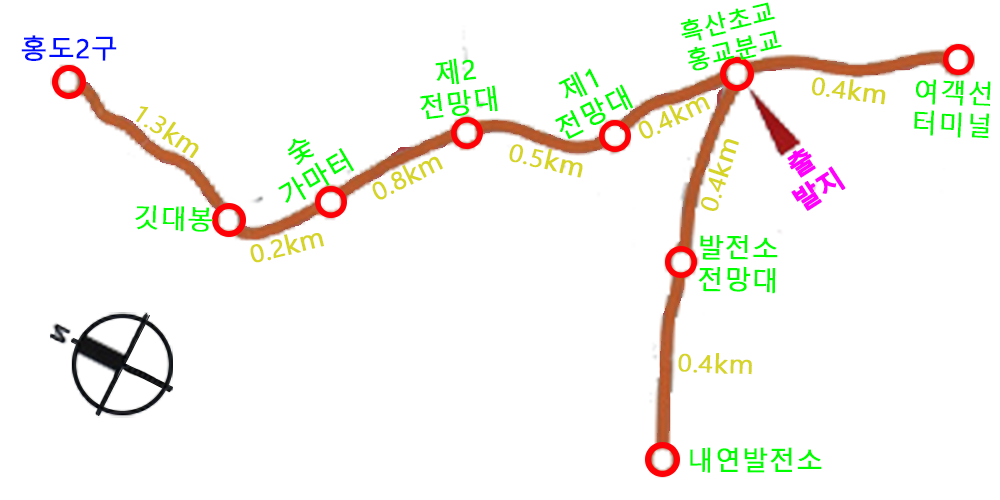
<style>
.page{position:relative;width:1000px;height:500px;background:#ffffff}
.page>*{position:absolute;margin:0}
.t1{font:24.1px "MalgunGothic";color:#00fe00;font-weight:bold}
.t2{font:26.3px "MalgunGothic";color:#000cfe;font-weight:bold}
.t3{font:26.6px/32px "MalgunGothic";color:#00fe00;font-weight:bold}
.t4{font:26.4px/32px "MalgunGothic";color:#00fe00;font-weight:bold}
.t5{font:24.2px "MalgunGothic";color:#d6d426;font-weight:bold;scale:1.06 1}
.t6{font:26.8px "MalgunGothic";color:#d6d426;font-weight:bold;scale:1.06 1}
.t7{font:24px "MalgunGothic";color:#d6d426;font-weight:bold;scale:1.07 1}
.t8{font:26.6px "MalgunGothic";color:#d6d426;font-weight:bold;scale:1.07 1}
.t9{font:24.1px "MalgunGothic";color:#d6d426;font-weight:bold;scale:1.06 1}
.t10{font:26.7px "MalgunGothic";color:#d6d426;font-weight:bold;scale:1.06 1}
.t11{font:23.9px "MalgunGothic";color:#d6d426;font-weight:bold;scale:1.07 1}
.t12{font:26.5px "MalgunGothic";color:#d6d426;font-weight:bold;scale:1.07 1}
.t13{font:23.8px "MalgunGothic";color:#d6d426;font-weight:bold;scale:1.06 1}
.t14{font:26.4px "MalgunGothic";color:#d6d426;font-weight:bold;scale:1.06 1}
.t15{font:26.3px "MalgunGothic";color:#00fe00;font-weight:bold}
.t16{font:24px "MalgunGothic";color:#d6d426;font-weight:bold;scale:1.06 1}
.t17{font:26.6px "MalgunGothic";color:#d6d426;font-weight:bold;scale:1.06 1}
.t18{font:26.2px/32px "MalgunGothic";color:#00fe00;font-weight:bold}
.t19{font:26.5px "MalgunGothic";color:#00fe00;font-weight:bold}
</style>
<div class="page">
<p class="t1" style="left:681px;top:2px;width:101px;height:69px;rotate:-13deg">흑산초교 <br>홍교분교</p>
<p class="t2" style="left:21px;top:35px;width:96px;height:26px">홍도2구</p>
<p class="t3" style="left:420px;top:58px;width:78px;height:62px;text-align:center;rotate:-7deg">제2<br>전망대</p>
<p class="t4" style="left:555px;top:68px;width:78px;height:71px;text-align:center;rotate:-26deg">제1<br>전망대</p>
<p class="t5" style="left:812px;top:77px;width:74px;height:28px;rotate:8deg">0.4<span class="t6">km</span></p>
<p class="t3" style="left:914px;top:79px;width:77px;height:60px;rotate:3deg">여객선<br>터미널</p>
<p class="t7" style="left:638px;top:97px;width:72px;height:42px;rotate:-26deg">0.4<span class="t8">km</span></p>
<p class="t9" style="left:136px;top:106px;width:63px;height:52px;rotate:34deg">1.3<span class="t10">km</span></p>
<p class="t3" style="left:278px;top:138px;width:76px;height:65px;text-align:center;rotate:-31deg">숯<br>가마터</p>
<p class="t9" style="left:509px;top:144px;width:74px;height:34px;rotate:13deg">0.5<span class="t10">km</span></p>
<p class="t11" style="left:701px;top:139px;width:38px;height:72px;rotate:-72deg">0.4<span class="t12">km</span></p>
<p class="t13" style="left:372px;top:156px;width:71px;height:44px;rotate:-27deg">0.8<span class="t14">km</span></p>
<p class="t15" style="left:135px;top:205px;width:78px;height:27px;rotate:2deg">깃대봉</p>
<p class="t16" style="left:250px;top:233px;width:74px;height:30px;rotate:-14deg">0.2<span class="t17">km</span></p>
<p class="t18" style="left:698px;top:235px;width:80px;height:59px;rotate:1deg">발전소<br>전망대</p>
<p class="t16" style="left:678px;top:353px;width:74px;height:22px;rotate:2deg">0.4<span class="t17">km</span></p>
<p class="t19" style="left:690px;top:447px;width:132px;height:26px">내연발전소</p>
</div>
